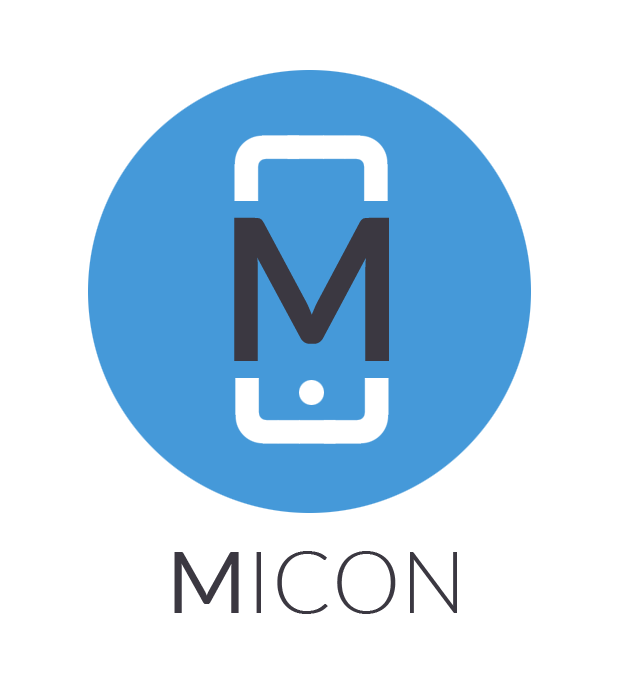
<style>
.page{position:relative;width:620px;height:694px;background:#ffffff}
.page>*{position:absolute;margin:0}
.t1{font:196.5px "Lato-Bold";color:#3b3841}
.t2{font:86.1px "Lato-Light";color:#3b3841}
.t3{font:86.1px "Lato-Regular";color:#3b3841}
</style>
<div class="page">
<p class="t1" style="left:234px;top:217px;width:155px;height:144px">M</p>
<p class="t2" style="left:174px;top:551px;width:283px;height:63px"><span class="t3">M</span>ICON</p>
</div>
